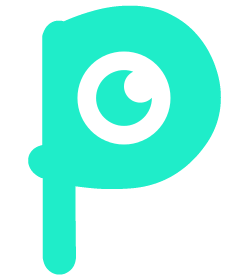
<style>
.page{position:relative;width:250px;height:280px;background:#ffffff}
.page>*{position:absolute;margin:0}
.t1{font:367.1px "Chalkboard";color:#1fedc9;text-transform:uppercase}
</style>
<div class="page">
<p class="t1" style="left:28px;top:5px;width:193px;height:270px">p</p>
</div>
